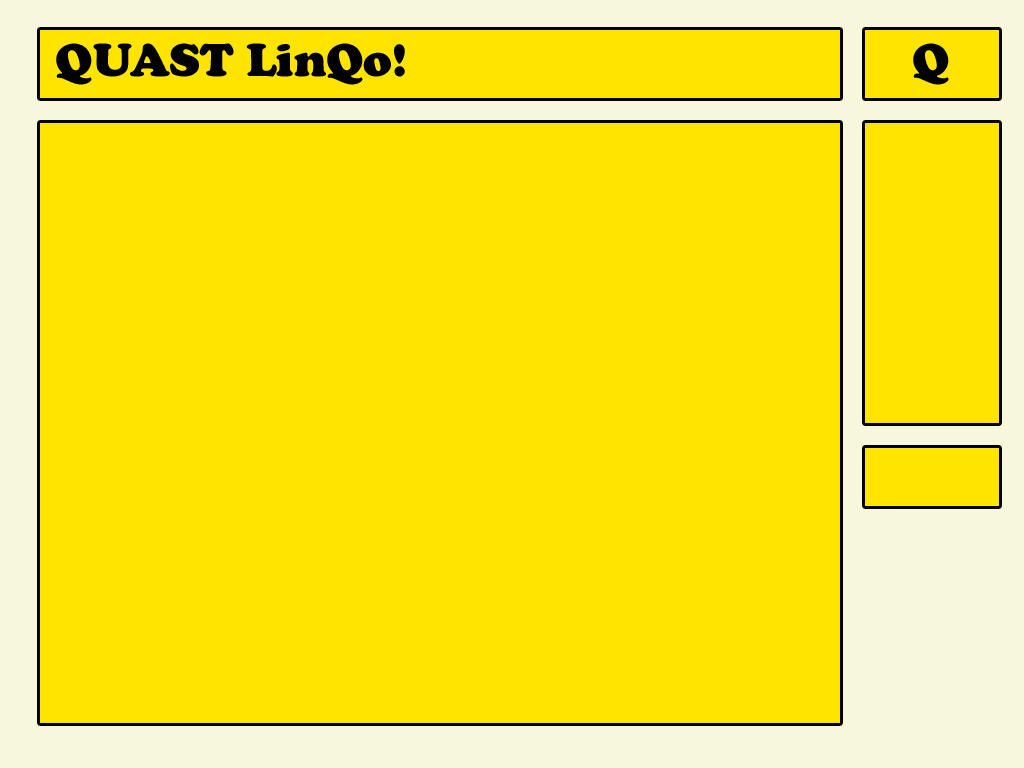
<style>
.page{position:relative;width:1024px;height:768px;background:#ffe400}
.page>*{position:absolute;margin:0}
.t1{font:48px "CooperBlack";color:#000000}
</style>
<div class="page">
<p class="t1" style="left:56px;top:43px;width:349px;height:42px">QUAST LinQo!</p>
<p class="t1" style="left:913px;top:43px;width:36px;height:42px">Q</p>
</div>
